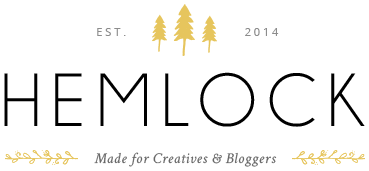
<style>
.page{position:relative;width:369px;height:171px;background:#ffffff}
.page>*{position:absolute;margin:0}
.t1{font:11px "OpenSans";letter-spacing:0.26em;color:#8c8c8c;text-transform:uppercase}
.t2{font:76px "Champagne&Limousines";letter-spacing:0.14em;color:#000000}
.t3{font:15px "CrimsonText-Italic";letter-spacing:0.04em;color:#666666}
</style>
<div class="page">
<p class="t1" style="left:97px;top:28px;width:29px;height:8px">EST.</p>
<p class="t1" style="left:245px;top:28px;width:34px;height:8px">2014</p>
<p class="t2" style="left:4px;top:72px;width:361px;height:55px">HEMLOCK</p>
<p class="t3" style="left:94px;top:152px;width:183px;height:15px">Made for Creatives &amp; Bloggers</p>
</div>
